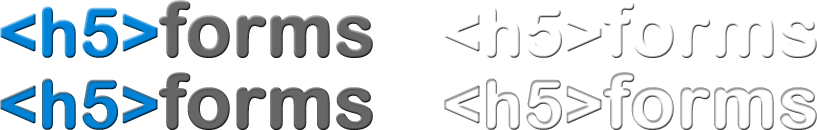
<style>
.page{position:relative;width:817px;height:130px;background:#ffffff}
.page>*{position:absolute;margin:0}
.t1{font:75px "ArialRoundedMTBold";letter-spacing:-0.01em;color:#666666;font-weight:bold}
.t2{font:66.7px "ArialRoundedMTBold";letter-spacing:-0.01em;color:#0083d7;font-weight:bold}
.t3{font:75px "ArialRoundedMTBold";letter-spacing:-0.01em;color:#ffffff;font-weight:bold}
.t4{font:66.7px "ArialRoundedMTBold";letter-spacing:-0.01em;color:#ffffff;font-weight:bold}
</style>
<div class="page">
<p class="t1" style="left:0px;top:0px;width:373px;height:58px"><span class="t2">&lt;h5&gt;</span>forms</p>
<p class="t1" style="left:0px;top:72px;width:373px;height:58px"><span class="t2">&lt;h5&gt;</span>forms</p>
<p class="t3" style="left:444px;top:72px;width:373px;height:58px"><span class="t4">&lt;h5&gt;</span>forms</p>
</div>
